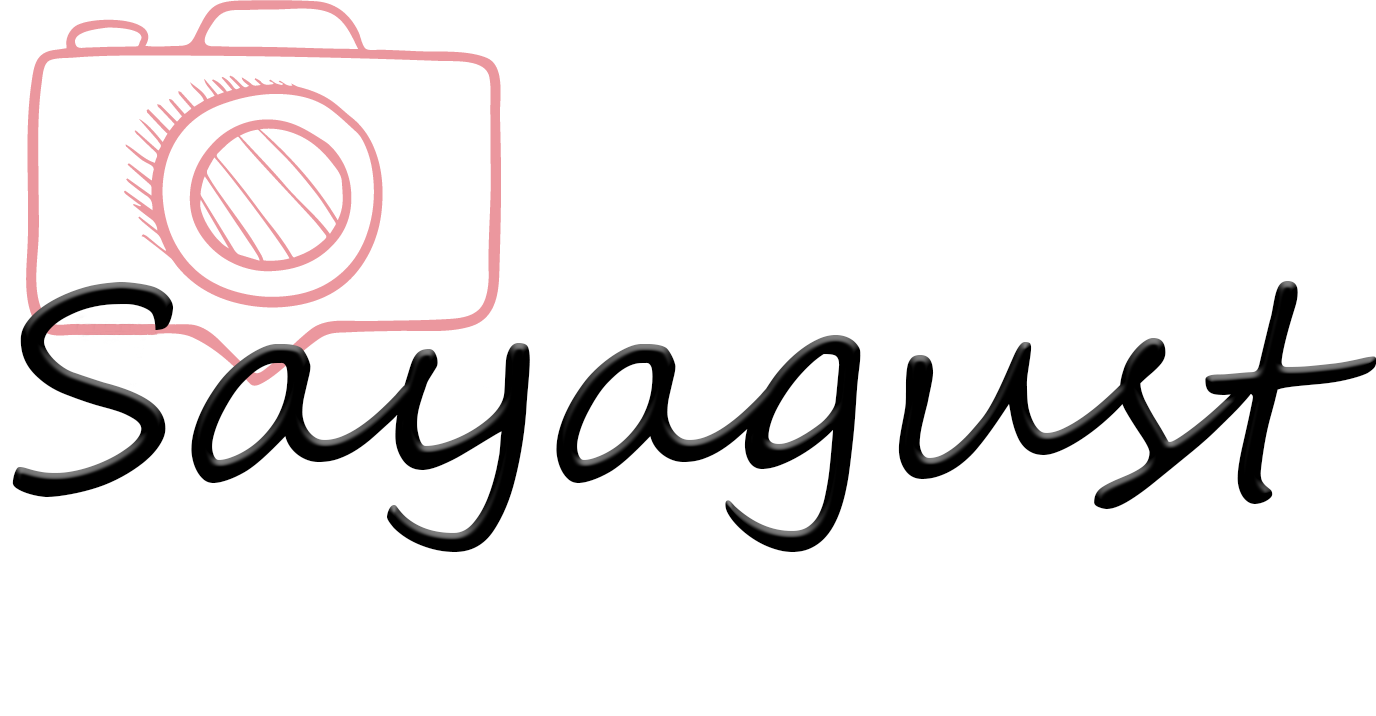
<style>
.page{position:relative;width:1376px;height:716px;background:#ffffff}
.page>*{position:absolute;margin:0}
.t1{font:284.2px "SegoeScript";color:#000000}
</style>
<div class="page">
<p class="t1" style="left:12px;top:281px;width:1365px;height:271px">Sayagust</p>
</div>
